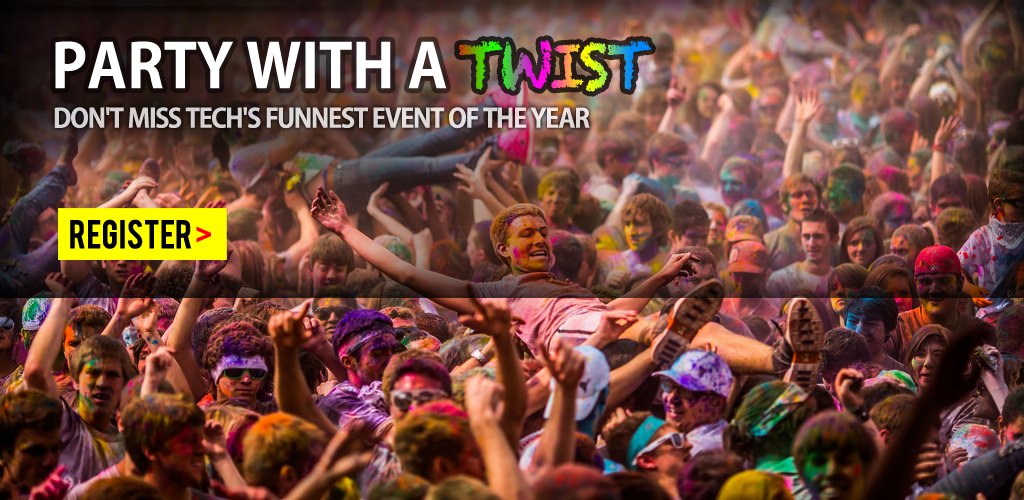
<style>
.page{position:relative;width:1024px;height:500px}
.page>*{position:absolute;margin:0}
.t1{font:60px "AdobeGothicStd-Bold";color:#ffffff;text-transform:uppercase}
.t2{font:26px "AdobeGothicStd-Bold";letter-spacing:-0.04em;color:#dbd5d4;text-transform:uppercase}
.t3{font:31.6px "Bebas";color:#000000;text-transform:uppercase}
.t4{font:31.6px "Bebas";color:#ff0000;text-transform:uppercase}
</style>
<div class="page">
<p class="t1" style="left:55px;top:41px;width:391px;height:48px">Party with a</p>
<p class="t2" style="left:54px;top:107px;width:536px;height:22px">Don't miss Tech's funnest event OF THE YEAR</p>
<p class="t3" style="left:70px;top:219px;width:141px;height:30px">REGISTER <span class="t4">&gt;</span></p>
</div>
